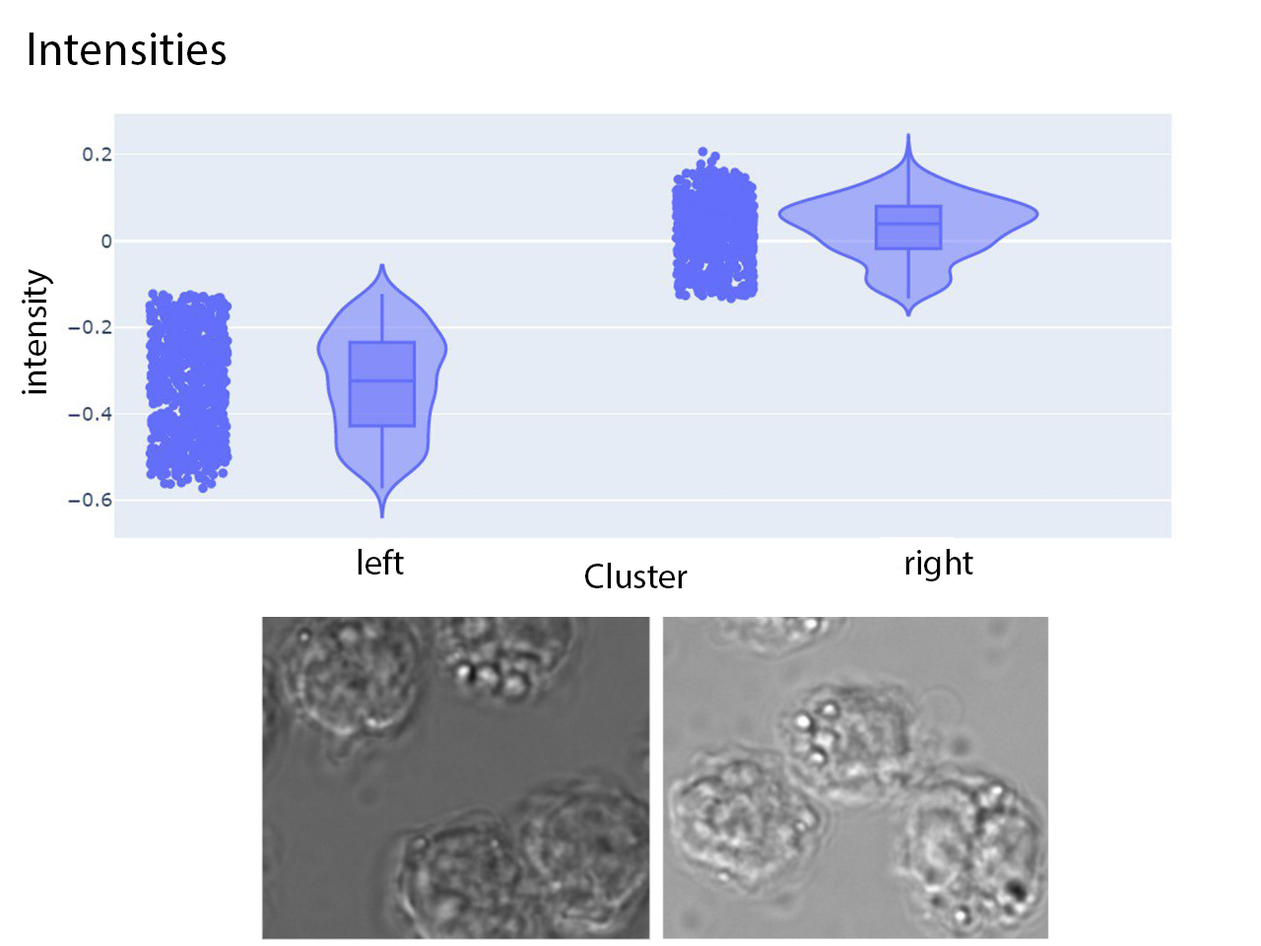
<style>
.page{position:relative;width:1261px;height:946px;background:#ffffff}
.page>*{position:absolute;margin:0}
.t1{font:47.3px "MyriadPro-Regular";color:#000000}
.t2{font:35.5px "MyriadPro-Regular";color:#000000}
</style>
<div class="page">
<p class="t1" style="left:29px;top:33px;width:197px;height:32px">Intensities</p>
<p class="t2" style="left:22px;top:269px;width:32px;height:125px;rotate:-90deg">intensity</p>
<p class="t2" style="left:358px;top:549px;width:46px;height:25px">left</p>
<p class="t2" style="left:905px;top:549px;width:68px;height:32px">right</p>
<p class="t2" style="left:585px;top:562px;width:103px;height:26px">Cluster</p>
</div>
